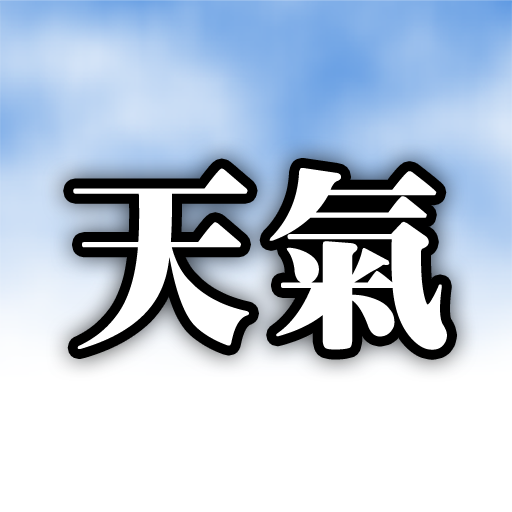
<style>
.page{position:relative;width:512px;height:512px;background:#ffffff}
.page>*{position:absolute;margin:0}
.t1{font:185.7px "ARMingB5-Ultra";letter-spacing:0.075em;color:#ffffff}
</style>
<div class="page">
<p class="t1" style="left:73px;top:168px;width:374px;height:182px">天氣</p>
</div>
